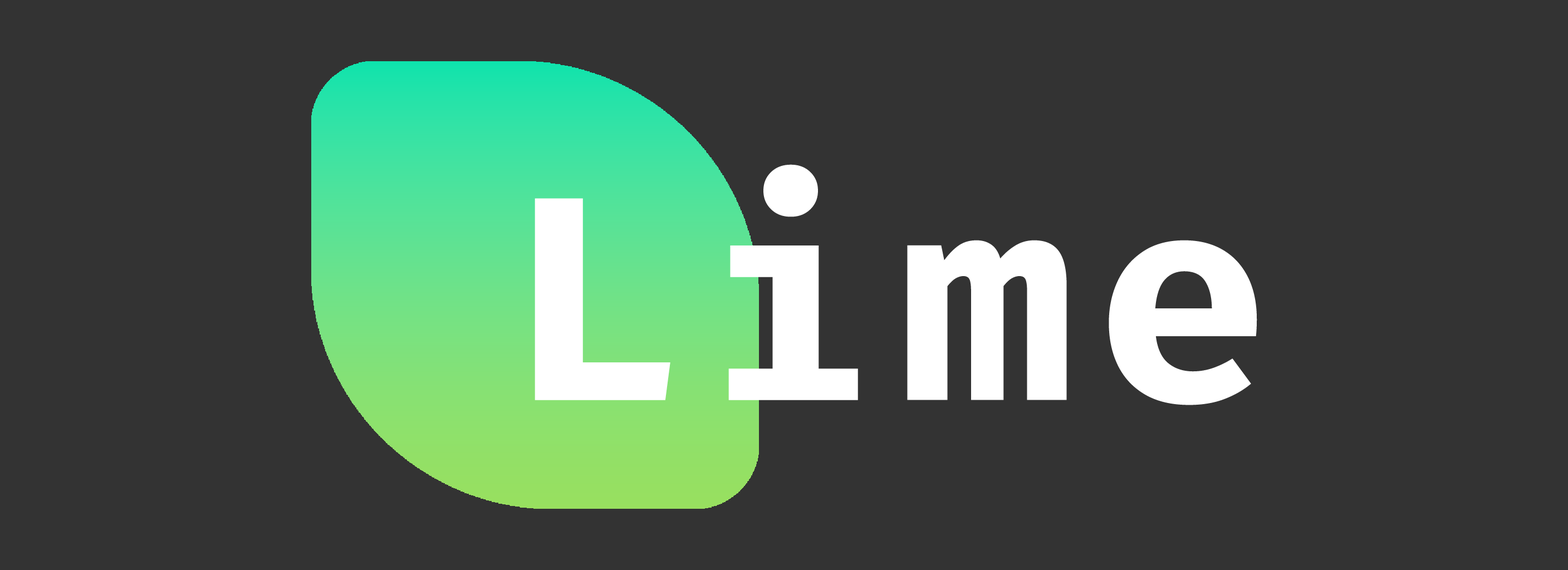
<style>
.page{position:relative;width:1568px;height:570px;background:#333333}
.page>*{position:absolute;margin:0}
.t1{font:283.7px "FiraCode-Bold";letter-spacing:0.075em;color:#ffffff}
</style>
<div class="page">
<p class="t1" style="left:535px;top:164px;width:722px;height:241px">Lime</p>
</div>
